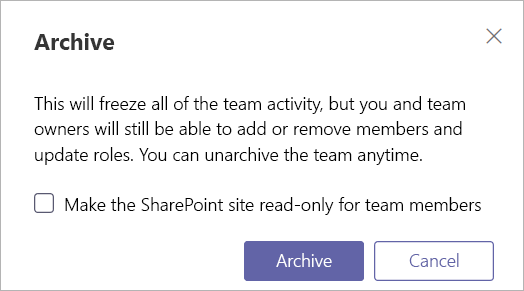
<style>
.page{position:relative;width:524px;height:291px;background:#ffffff}
.page>*{position:absolute;margin:0}
.t1{font:22.7px "SegoeUI-Bold";color:#353535}
.t2{font:18px/25.3px "SegoeUI-Semilight";color:#000000}
.t3{font:18px "SegoeUI-Semilight";color:#000000}
.t4{font:17.7px "SegoeUI-Semilight";color:#ffffff}
.t5{font:17.7px "SegoeUI-Semilight";color:#6264a7}
</style>
<div class="page">
<p class="t1" style="left:34px;top:33px;width:81px;height:17px">Archive</p>
<p class="t2" style="left:34px;top:96px;width:431px;height:69px">This will freeze all of the team activity, but you and team<br>owners will still be able to add or remove members and<br>update roles. You can unarchive the team anytime.</p>
<p class="t3" style="left:65px;top:197px;width:416px;height:18px">Make the SharePoint site read-only for team members</p>
<p class="t4" style="left:276px;top:253px;width:56px;height:14px">Archive</p>
<p class="t5" style="left:409px;top:253px;width:50px;height:14px">Cancel</p>
</div>
